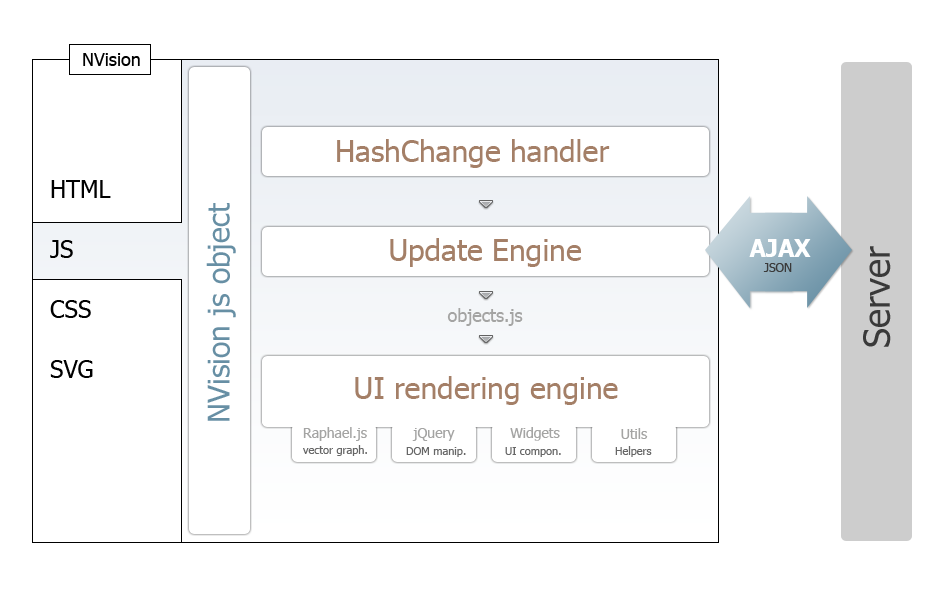
<style>
.page{position:relative;width:944px;height:601px;background:#ffffff}
.page>*{position:absolute;margin:0}
.t1{font:18px "Tahoma";color:#000000}
.t2{font:30px "Tahoma";color:#a47f67}
.t3{font:24px/60px "Tahoma";color:#000000}
.t4{font:30px "Tahoma";color:#678fa4}
.t5{font:24px "Tahoma-Bold";color:#ffffff}
.t6{font:36px "Tahoma";color:#3a3a3a}
.t7{font:12px "Tahoma";color:#3a3a3a}
.t8{font:18px "Tahoma";color:#a4a4a3}
.t9{font:14px "Tahoma";color:#a4a4a3}
.t10{font:11px "Tahoma";color:#676767}
</style>
<div class="page">
<p class="t1" style="left:83px;top:53px;width:57px;height:13px">NVision</p>
<p class="t2" style="left:337px;top:139px;width:273px;height:29px">HashChange handler</p>
<p class="t3" style="left:50px;top:180px;width:61px;height:198px">HTML<br>JS<br>CSS<br>SVG</p>
<p class="t4" style="left:206px;top:203px;width:30px;height:218px;rotate:-90deg">NVision js object</p>
<p class="t2" style="left:390px;top:238px;width:191px;height:29px">Update Engine</p>
<p class="t5" style="left:749px;top:239px;width:62px;height:18px">AJAX</p>
<p class="t6" style="left:863px;top:246px;width:28px;height:101px;rotate:-90deg">Server</p>
<p class="t7" style="left:763px;top:263px;width:29px;height:9px">JSON</p>
<p class="t8" style="left:447px;top:308px;width:76px;height:18px">objects.js</p>
<p class="t2" style="left:355px;top:376px;width:263px;height:29px">UI rendering engine</p>
<p class="t9" style="left:303px;top:427px;width:64px;height:14px">Raphael.js</p>
<p class="t9" style="left:412px;top:428px;width:43px;height:13px">jQuery</p>
<p class="t9" style="left:510px;top:427px;width:50px;height:14px">Widgets</p>
<p class="t9" style="left:621px;top:428px;width:27px;height:11px">Utils</p>
<p class="t10" style="left:303px;top:445px;width:64px;height:11px">vector graph.</p>
<p class="t10" style="left:406px;top:447px;width:60px;height:10px">DOM manip.</p>
<p class="t10" style="left:505px;top:447px;width:56px;height:10px">UI compon.</p>
<p class="t10" style="left:615px;top:446px;width:37px;height:11px">Helpers</p>
</div>
